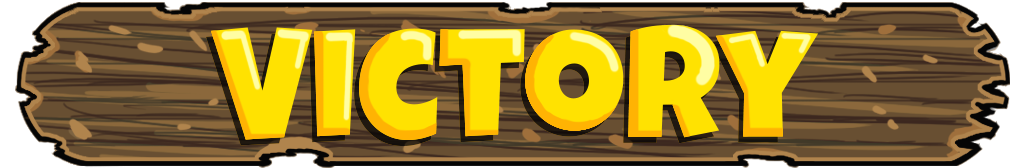
<style>
.page{position:relative;width:1024px;height:168px}
.page>*{position:absolute;margin:0}
.t1{font:158.2px "LuckiestGuy-Regular";color:#ffe201}
</style>
<div class="page">
<p class="t1" style="left:211px;top:24px;width:608px;height:116px">Victory</p>
</div>
